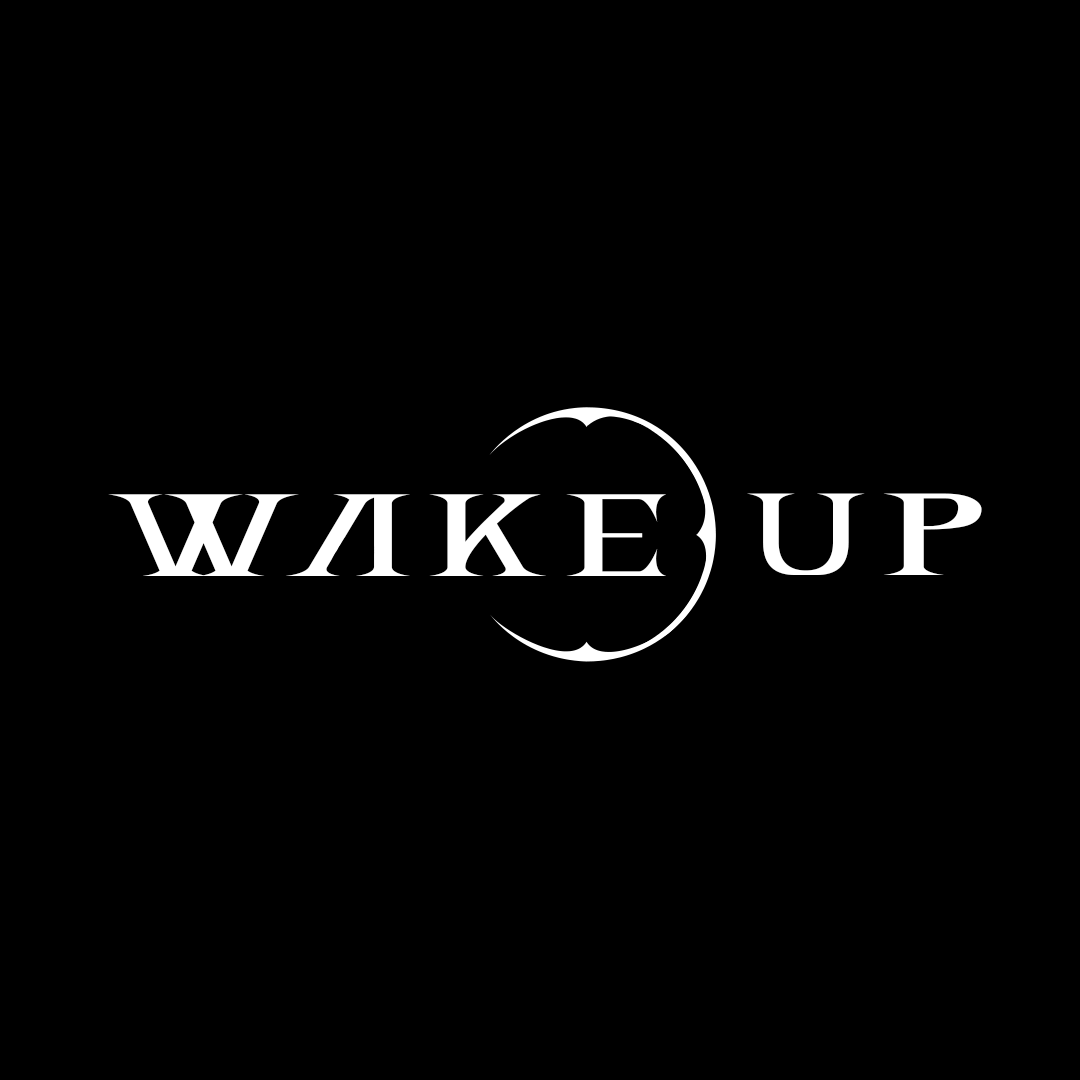
<style>
.page{position:relative;width:1080px;height:1080px;background:#000000}
.page>*{position:absolute;margin:0}
.t1{font:129.1px "KnightSoulsPersonalUse";letter-spacing:0.135em;color:#ffffff}
.t2{font:128.7px "KnightSoulsPersonalUse";letter-spacing:0.175em;color:#ffffff;scale:0.88 1}
.t3{font:128.7px "KnightSoulsPersonalUse";letter-spacing:0.175em;color:#ffffff;scale:1.12 1}
</style>
<div class="page">
<p class="t1" style="left:108px;top:494px;width:558px;height:82px">wake</p>
<p class="t2" style="left:747px;top:493px;width:235px;height:82px">u<span class="t3">p</span></p>
</div>
